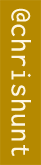
<style>
.page{position:relative;width:41px;height:165px;background:#b58900}
.page>*{position:absolute;margin:0}
.t1{font:25px "Inconsolata-g";color:#fdf6e3}
</style>
<div class="page">
<p class="t1" style="left:11px;top:8px;width:20px;height:148px;rotate:90deg">@chrishunt</p>
</div>
